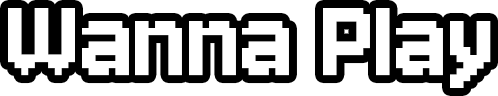
<style>
.page{position:relative;width:498px;height:96px;background:#ffffff}
.page>*{position:absolute;margin:0}
.t1{font:125px "Jersey10-Regular";color:#ffffff}
</style>
<div class="page">
<p class="t1" style="left:8px;top:8px;width:483px;height:80px">Wanna Play</p>
</div>
